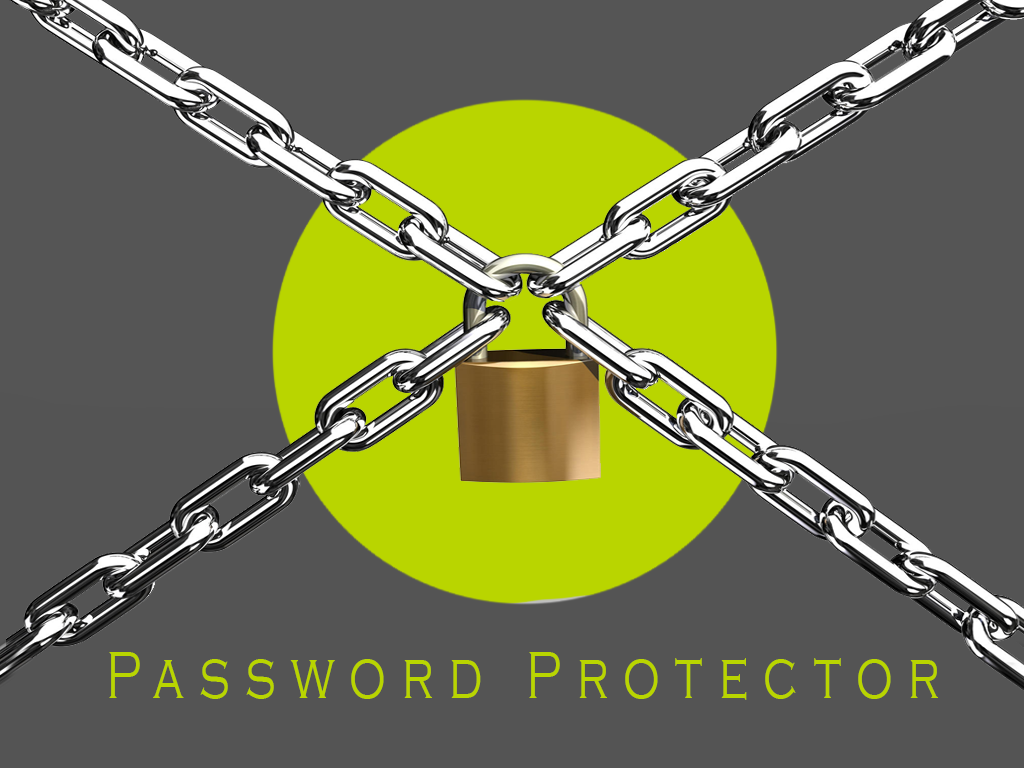
<style>
.page{position:relative;width:1024px;height:768px;background:#555555}
.page>*{position:absolute;margin:0}
.t1{font:68.8px "CopperplateGothic-Light";letter-spacing:0.32em;color:#b9d500;scale:0.71 1}
</style>
<div class="page">
<p class="t1" style="left:109px;top:652px;width:829px;height:48px">Password Protector</p>
</div>
